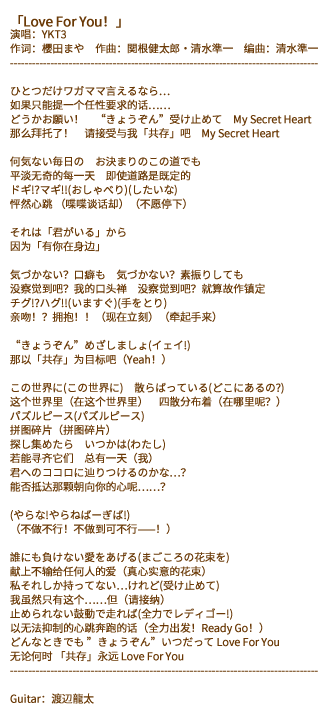
<style>
.page{position:relative;width:328px;height:720px;background:#ffffff}
.page>*{position:absolute;margin:0}
.t1{font:10.7px/14.1px "SourceHanSansSC-Regular";letter-spacing:-0.03em;color:#6a3906;font-weight:bold}
.t2{font:13.3px/14.1px "SourceHanSansSC-Regular";letter-spacing:-0.03em;color:#6a3906;font-weight:bold}
</style>
<div class="page">
<p class="t1" style="left:10px;top:15px;width:308px;height:689px"><span class="t2">「Love For You！」<br></span>演唱：YKT3<br>作词：櫻田まや　作曲：関根健太郎・清水準一　编曲：清水準一<br>------------------------------------------------------------------------------------<br><br>ひとつだけワガママ言えるなら…<br>如果只能提一个任性要求的话……<br>どうかお願い！　“きょうぞん”受け止めて　My Secret Heart<br>那么拜托了！　请接受与我「共存」吧　My Secret Heart<br><br>何気ない毎日の　お決まりのこの道でも<br>平淡无奇的每一天　即使道路是既定的<br>ドギ!?マギ!!(おしゃべり)(したいな)<br>怦然心跳 （喋喋谈话却）（不愿停下）<br><br>それは「君がいる」から<br>因为「有你在身边」<br><br>気づかない？口癖も　気づかない？素振りしても<br>没察觉到吧？我的口头禅　没察觉到吧？就算故作镇定<br>チグ!?ハグ!!(いますぐ)(手をとり)<br>亲吻！？拥抱！！（现在立刻）（牵起手来）<br><br>“きょうぞん”めざしましょ(イェイ!)<br>那以「共存」为目标吧（Yeah！）<br><br>この世界に(この世界に)　散らばっている(どこにあるの?)<br>这个世界里（在这个世界里）　四散分布着（在哪里呢？）<br>パズルピース(パズルピース)<br>拼图碎片（拼图碎片）<br>探し集めたら　いつかは(わたし)<br>若能寻齐它们　总有一天（我）<br>君へのココロに辿りつけるのかな…？<br>能否抵达那颗朝向你的心呢……？<br><br>(やらな!やらねばーぎば!)<br>（不做不行！不做到可不行——！）<br><br>誰にも負けない愛をあげる(まごころの花束を)<br>献上不输给任何人的爱（真心实意的花束）<br>私それしか持ってない…けれど(受け止めて)<br>我虽然只有这个……但（请接纳）<br>止められない鼓動で走れば(全力でレディゴー!)<br>以无法抑制的心跳奔跑的话（全力出发！Ready Go！）<br>どんなときでも ”きょうぞん”いつだって Love For You<br>无论何时 「共存」永远 Love For You<br>------------------------------------------------------------------------------------<br><br>Guitar：渡辺龍太</p>
</div>
